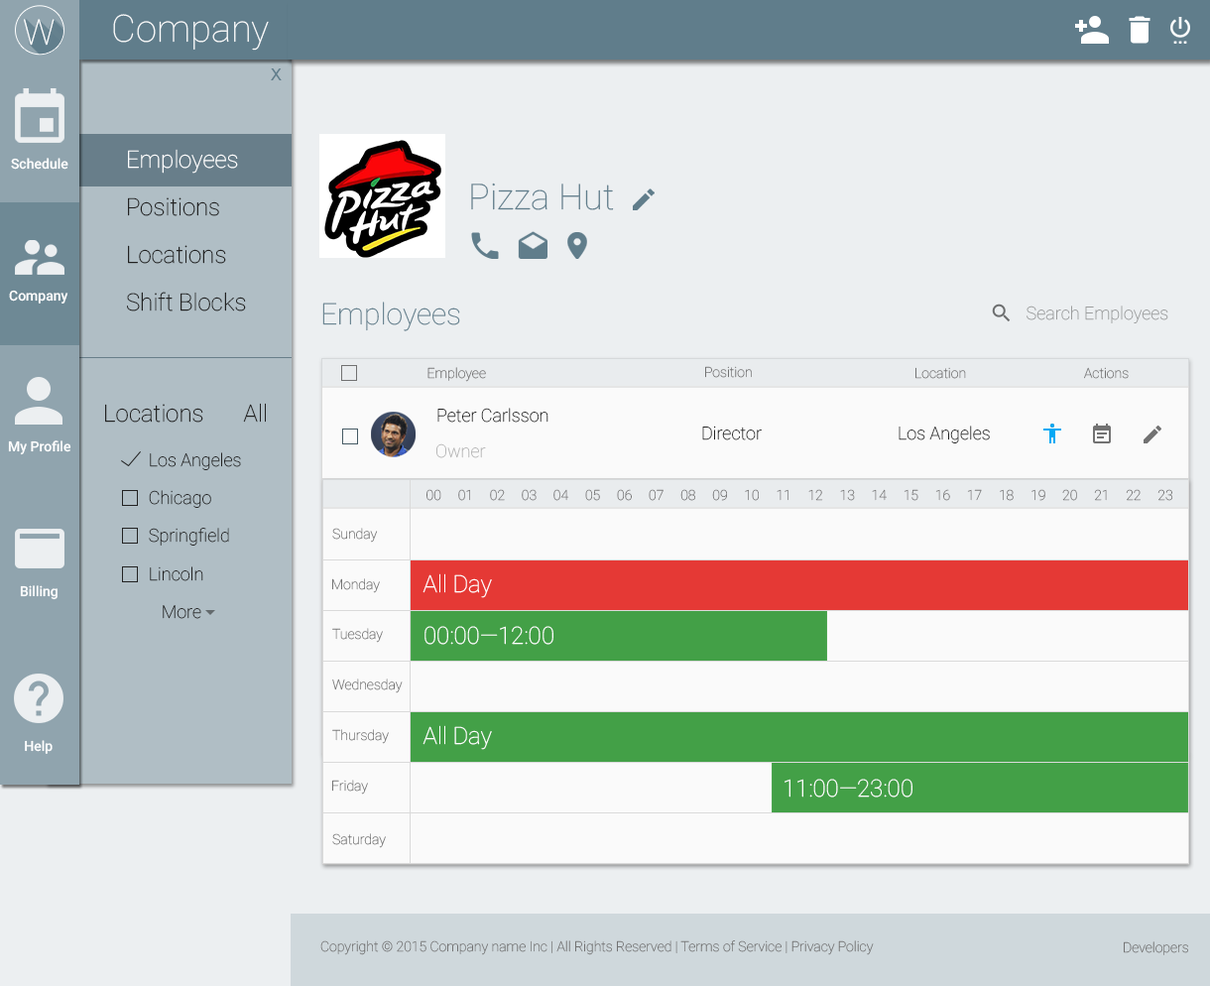
<style>
.page{position:relative;width:1210px;height:986px;background:#eceff1}
.page>*{position:absolute;margin:0}
.t1{font:37.7px "Roboto-Thin";color:#ffffff}
.t2{font:35.4px "Roboto-Thin";color:#ffffff}
.t3{font:17.8px "Raavi";color:#607d8b}
.t4{font:23.8px/47.6px "Roboto-Thin";color:#222222}
.t5{font:23.8px/47.6px "Roboto-Thin";color:#ffffff}
.t6{font:13.9px "Roboto-Medium";color:#ffffff}
.t7{font:35.7px "Roboto-Thin";color:#607d8b}
.t8{font:29.7px "Roboto-Thin";color:#607d8b}
.t9{font:17.8px "Roboto-Thin";color:#9b9d9d}
.t10{font:13.9px "Roboto-Thin";color:#727272}
.t11{font:23.8px "Roboto-Thin";color:#222222}
.t12{font:17.8px "Roboto-Thin";color:#222222}
.t13{font:17.8px "Roboto-Thin";color:#b8b8b8}
.t14{font:17.8px/37.7px "Roboto-Thin";color:#222222}
.t15{font:17.8px/38.7px "Roboto-Thin";color:#222222}
.t16{font:23.8px "Roboto-Thin";color:#ffffff}
</style>
<div class="page">
<p class="t1" style="left:113px;top:14px;width:156px;height:37px">Company</p>
<p class="t2" style="left:24px;top:19px;width:31px;height:27px">W</p>
<p class="t2" style="left:24px;top:19px;width:31px;height:27px">W</p>
<p class="t3" style="left:271px;top:68px;width:11px;height:12px">X</p>
<p class="t4" style="left:127px;top:149px;width:119px;height:162px"><span class="t5">Employees<br></span>Positions<br>Locations<br>Shift Blocks</p>
<p class="t6" style="left:11px;top:158px;width:57px;height:12px">Schedule</p>
<p class="t7" style="left:471px;top:182px;width:143px;height:28px">Pizza Hut</p>
<p class="t6" style="left:9px;top:290px;width:59px;height:13px">Company</p>
<p class="t8" style="left:322px;top:301px;width:138px;height:30px">Employees</p>
<p class="t9" style="left:1026px;top:305px;width:142px;height:18px">Search Employees</p>
<p class="t10" style="left:705px;top:366px;width:47px;height:12px">Position</p>
<p class="t10" style="left:427px;top:367px;width:59px;height:15px">Employee</p>
<p class="t10" style="left:915px;top:367px;width:51px;height:12px">Location</p>
<p class="t10" style="left:1084px;top:367px;width:44px;height:12px">Actions</p>
<p class="t11" style="left:105px;top:403px;width:161px;height:19px">Locations       All</p>
<p class="t12" style="left:437px;top:408px;width:111px;height:14px">Peter Carlsson</p>
<p class="t12" style="left:702px;top:425px;width:60px;height:15px">Director</p>
<p class="t12" style="left:898px;top:425px;width:92px;height:18px">Los Angeles</p>
<p class="t6" style="left:8px;top:440px;width:63px;height:15px">My Profile</p>
<p class="t13" style="left:436px;top:443px;width:50px;height:15px">Owner</p>
<p class="t14" style="left:149px;top:452px;width:92px;height:167px"><span class="t12">Los Angeles<br></span>Chicago<br>Springfield<br><span class="t15">Lincoln<br></span>   More</p>
<p class="t10" style="left:426px;top:489px;width:747px;height:12px">00     01     02     03     04     05     06     07     08     09     10     11     12     13     14     15     16     17     18     19     20     21     22     23</p>
<p class="t10" style="left:332px;top:528px;width:46px;height:14px">Sunday</p>
<p class="t10" style="left:332px;top:578px;width:48px;height:15px">Monday</p>
<p class="t16" style="left:422px;top:573px;width:70px;height:25px">All Day</p>
<p class="t6" style="left:20px;top:585px;width:38px;height:15px">Billing</p>
<p class="t10" style="left:332px;top:628px;width:51px;height:15px">Tuesday</p>
<p class="t16" style="left:424px;top:626px;width:129px;height:19px">00:00—12:00</p>
<p class="t10" style="left:332px;top:678px;width:71px;height:15px">Wednesday</p>
<p class="t16" style="left:422px;top:725px;width:70px;height:25px">All Day</p>
<p class="t10" style="left:332px;top:729px;width:57px;height:15px">Thursday</p>
<p class="t6" style="left:25px;top:740px;width:28px;height:14px">Help</p>
<p class="t10" style="left:332px;top:779px;width:36px;height:15px">Friday</p>
<p class="t16" style="left:784px;top:778px;width:128px;height:19px">11:00—23:00</p>
<p class="t10" style="left:332px;top:833px;width:54px;height:15px">Saturday</p>
<p class="t10" style="left:320px;top:940px;width:554px;height:15px">Copyright © 2015 Company name Inc | All Rights Reserved | Terms of Service | Privacy Policy</p>
<p class="t10" style="left:1124px;top:941px;width:64px;height:14px">Developers</p>
</div>
